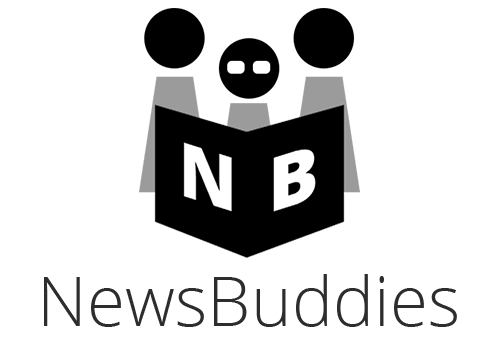
<style>
.page{position:relative;width:500px;height:346px;background:#ffffff}
.page>*{position:absolute;margin:0}
.t1{font:69.4px "OpenSans-Light";color:#2d2d2d}
</style>
<div class="page">
<p class="t1" style="left:44px;top:274px;width:413px;height:53px">NewsBuddies</p>
</div>
